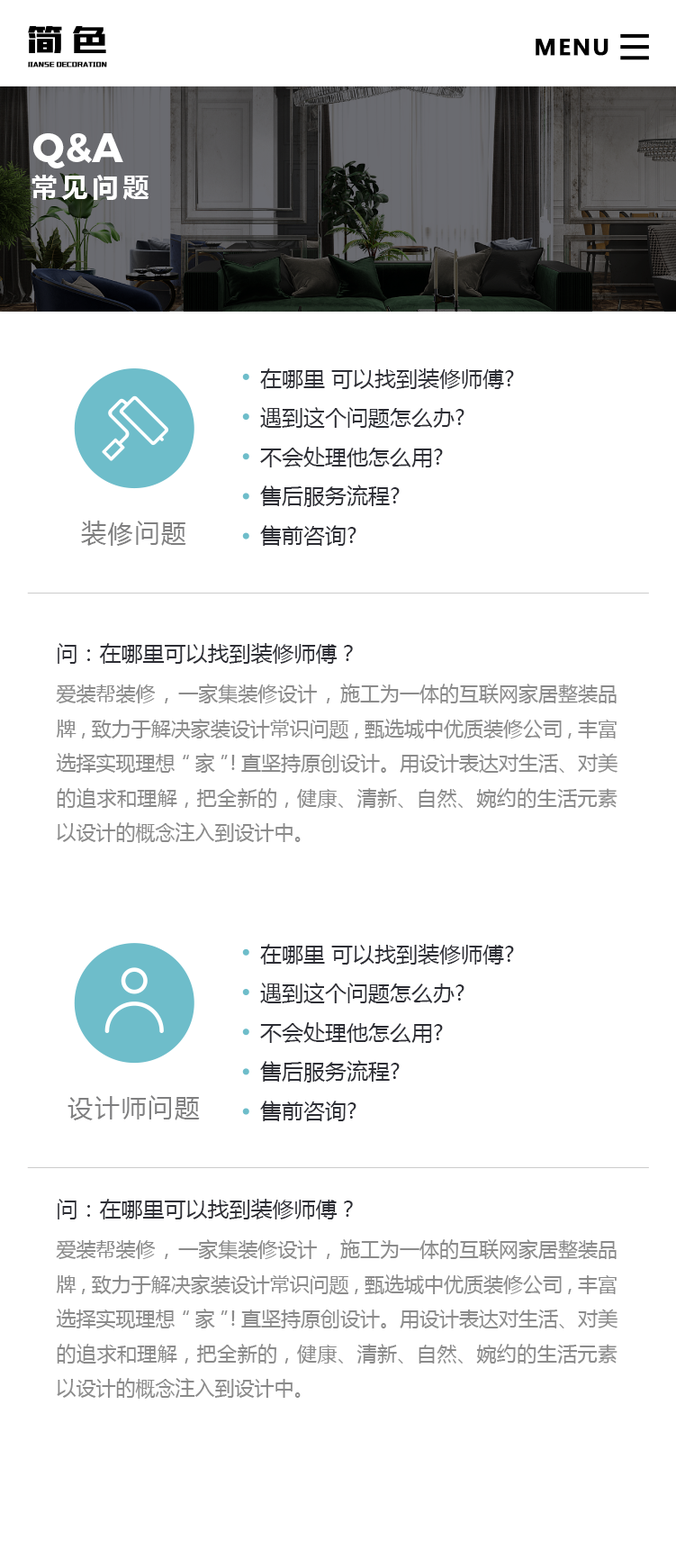
<style>
.page{position:relative;width:676px;height:1568px;background:#ffffff}
.page>*{position:absolute;margin:0}
.t1{font:21.6px "MicrosoftYaHei-Bold";letter-spacing:0.06em;color:#000000;font-weight:bold}
.t2{font:40px "Montserrat-Bold";color:#ffffff}
.t3{font:26px "MicrosoftYaHei-Bold";letter-spacing:0.18em;color:#ffffff}
.t4{font:21.6px/39.3px "MicrosoftYaHei";color:#2d2e35}
.t5{font:25.2px "MicrosoftYaHei";letter-spacing:0.06em;color:#7f7f80}
.t6{font:21.6px "MicrosoftYaHei";color:#2d2e35}
.t7{font:19.8px "MicrosoftYaHei";color:#8b8b8b}
</style>
<div class="page">
<p class="t1" style="left:536px;top:39px;width:73px;height:17px">MENU</p>
<p class="t2" style="left:33px;top:133px;width:90px;height:35px">Q&amp;A</p>
<p class="t3" style="left:32px;top:175px;width:117px;height:25px">常见问题</p>
<p class="t4" style="left:260px;top:368px;width:254px;height:178px">在哪里 可以找到装修师傅?<br>遇到这个问题怎么办?<br>不会处理他怎么用?<br>售后服务流程?<br>售前咨询?</p>
<p class="t5" style="left:81px;top:521px;width:105px;height:25px">装修问题</p>
<p class="t6" style="left:58px;top:643px;width:295px;height:21px">问：在哪里可以找到装修师傅？</p>
<p class="t7" style="left:56px;top:684px;width:562px;height:159px;text-align:justify">爱装帮装修,一家集装修设计,施工为一体的互联网家居整装品牌,致力于解决家装设计常识问题,甄选城中优质装修公司,丰富选择实现理想“家”!直坚持原创设计。用设计表达对生活、对美的追求和理解，把全新的，健康、清新、自然、婉约的生活元素以设计的概念注入到设计中。</p>
<p class="t4" style="left:260px;top:944px;width:254px;height:177px">在哪里 可以找到装修师傅?<br>遇到这个问题怎么办?<br>不会处理他怎么用?<br>售后服务流程?<br>售前咨询?</p>
<p class="t5" style="left:68px;top:1095px;width:132px;height:25px">设计师问题</p>
<p class="t6" style="left:58px;top:1199px;width:295px;height:20px">问：在哪里可以找到装修师傅？</p>
<p class="t7" style="left:56px;top:1239px;width:562px;height:160px;text-align:justify">爱装帮装修,一家集装修设计,施工为一体的互联网家居整装品牌,致力于解决家装设计常识问题,甄选城中优质装修公司,丰富选择实现理想“家”!直坚持原创设计。用设计表达对生活、对美的追求和理解，把全新的，健康、清新、自然、婉约的生活元素以设计的概念注入到设计中。</p>
</div>
